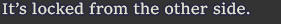
<style>
.page{position:relative;width:281px;height:24px;background:#333333}
.page>*{position:absolute;margin:0}
.t1{font:16px "Sitka-Small";color:#dedece}
</style>
<div class="page">
<p class="t1" style="left:2px;top:2px;width:248px;height:13px">It’s locked from the other side.</p>
</div>
